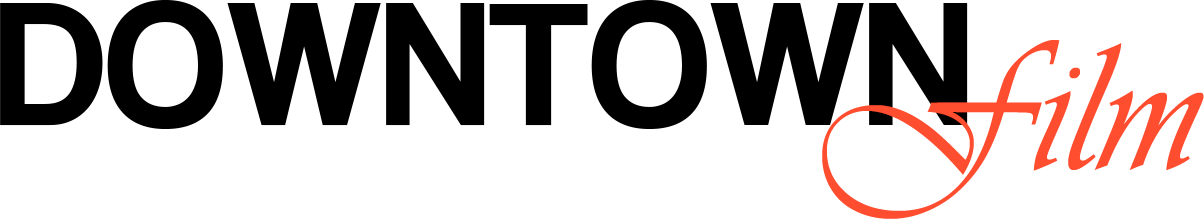
<style>
.page{position:relative;width:1204px;height:219px;background:#ffffff}
.page>*{position:absolute;margin:0}
.t1{font:181px "CoolveticaRg-Regular";color:#000000}
.t2{font:188.5px "Vivaldii";color:#ff4d30}
</style>
<div class="page">
<p class="t1" style="left:0px;top:0px;width:968px;height:129px">DOWNTOWN</p>
<p class="t2" style="left:822px;top:40px;width:382px;height:179px">Film</p>
</div>
